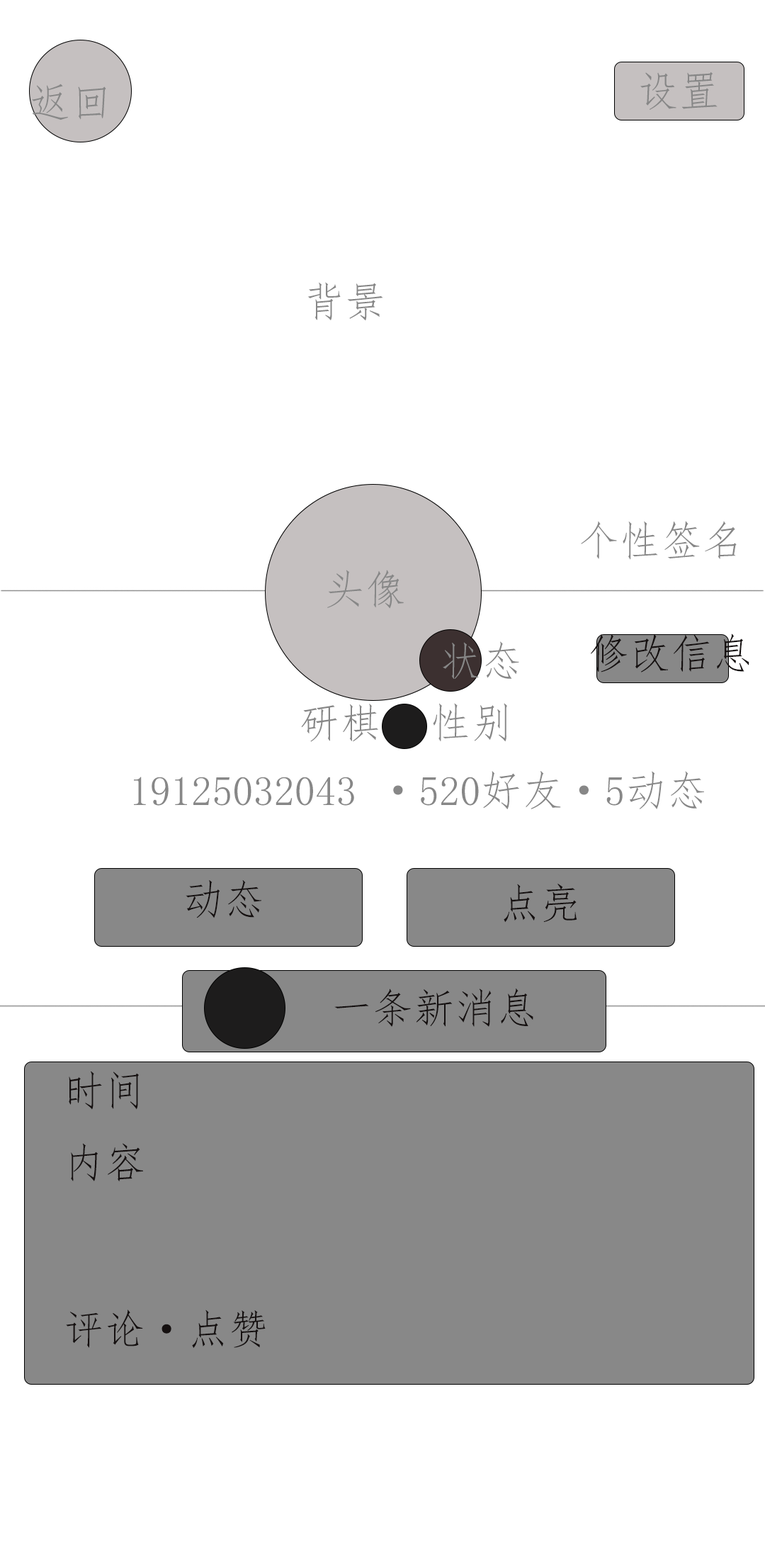
<style>
.page{position:relative;width:765px;height:1559px;background:#ffffff}
.page>*{position:absolute;margin:0}
.t1{font:41.3px "FangSong";color:#878787}
.t2{font:41.3px "FangSong";color:#151010}
</style>
<div class="page">
<p class="t1" style="left:640px;top:72px;width:78px;height:38px">设置</p>
<p class="t1" style="left:32px;top:84px;width:74px;height:36px">返回</p>
<p class="t1" style="left:307px;top:282px;width:76px;height:39px">背景</p>
<p class="t1" style="left:581px;top:521px;width:156px;height:39px">个性签名</p>
<p class="t1" style="left:327px;top:570px;width:77px;height:39px">头像</p>
<p class="t2" style="left:591px;top:633px;width:159px;height:39px">修改信息</p>
<p class="t1" style="left:301px;top:703px;width:77px;height:39px">研棋</p>
<p class="t1" style="left:433px;top:703px;width:74px;height:39px">性别</p>
<p class="t1" style="left:134px;top:771px;width:570px;height:38px">19125032043 ·520好友·5动态</p>
<p class="t2" style="left:186px;top:880px;width:75px;height:38px">动态</p>
<p class="t2" style="left:504px;top:883px;width:73px;height:39px">点亮</p>
<p class="t2" style="left:334px;top:988px;width:199px;height:39px">一条新消息</p>
<p class="t2" style="left:69px;top:1070px;width:74px;height:111px">时间<br>内容</p>
<p class="t2" style="left:66px;top:1309px;width:200px;height:39px">评论·点赞</p>
</div>
